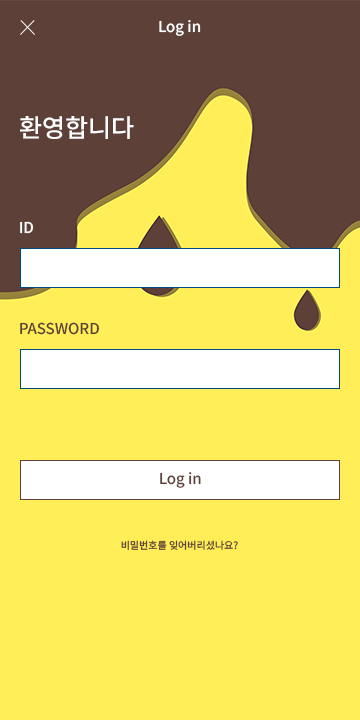
<style>
.page{position:relative;width:360px;height:720px;background:#ffee58}
.page>*{position:absolute;margin:0}
.t1{font:15px "NotoSansKR-Medium";color:#ffffff}
.t2{font:25px "NotoSansKR-Medium";color:#ffffff}
.t3{font:15px "NotoSansKR-Medium";color:#5d4037}
.t4{font:10px "NotoSansKR-Medium";color:#5d4037}
</style>
<div class="page">
<p class="t1" style="left:159px;top:20px;width:42px;height:16px">Log in</p>
<p class="t2" style="left:20px;top:116px;width:114px;height:23px">환영합니다</p>
<p class="t1" style="left:20px;top:221px;width:14px;height:13px">ID</p>
<p class="t3" style="left:20px;top:322px;width:80px;height:13px">PASSWORD</p>
<p class="t3" style="left:160px;top:472px;width:41px;height:16px">Log in</p>
<p class="t4" style="left:121px;top:540px;width:117px;height:10px">비밀번호를 잊어버리셨나요?</p>
</div>
